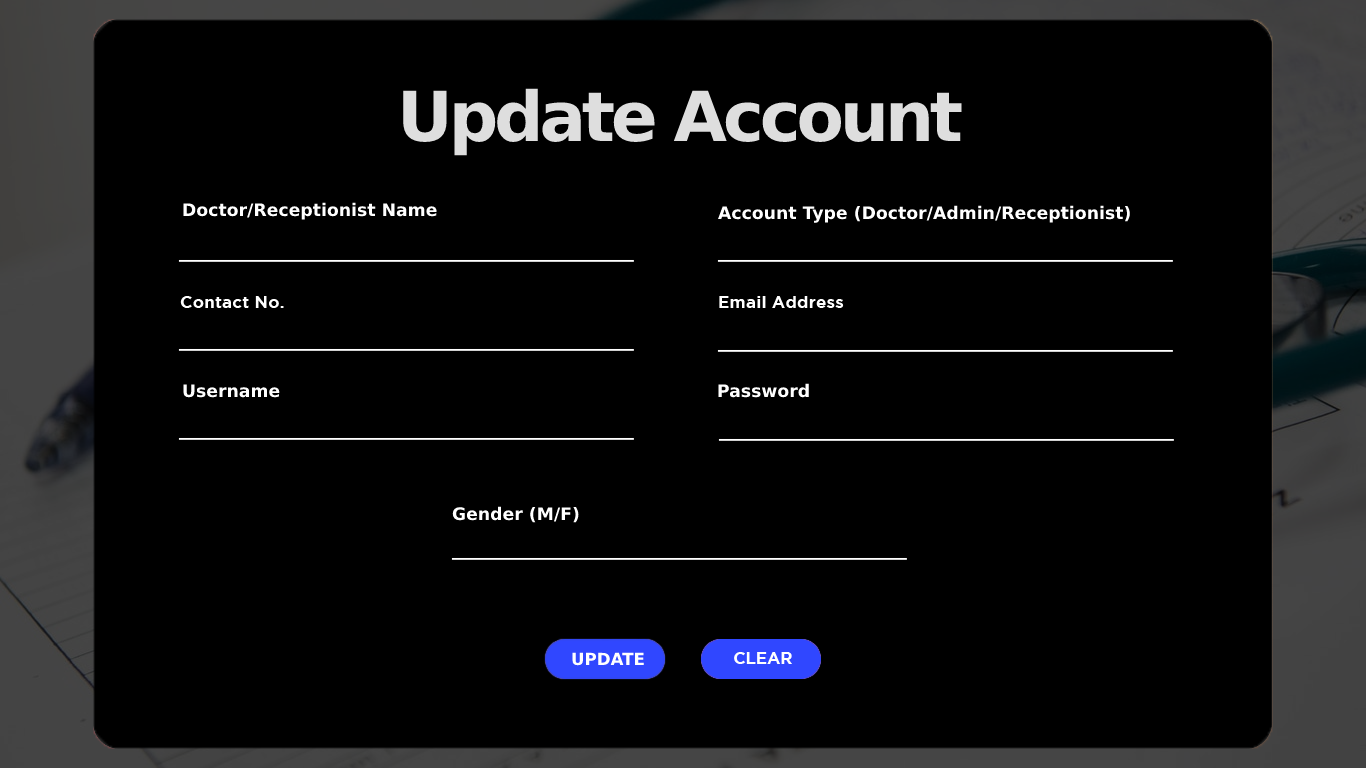
<style>
.page{position:relative;width:1366px;height:768px;background:#000000}
.page>*{position:absolute;margin:0}
.t1{font:68.9px "Gotham-Bold";letter-spacing:-0.06em;color:#dedede}
.t2{font:17.3px "Gotham-Bold";color:#ffffff}
.t3{font:16.7px "Gotham-Bold";color:#ffffff}
</style>
<div class="page">
<p class="t1" style="left:403px;top:88px;width:559px;height:68px">Update Account</p>
<p class="t2" style="left:183px;top:202px;width:254px;height:18px">Doctor/Receptionist Name</p>
<p class="t2" style="left:718px;top:205px;width:412px;height:18px">Account Type (Doctor/Admin/Receptionist)</p>
<p class="t2" style="left:180px;top:296px;width:104px;height:12px">Contact No.</p>
<p class="t2" style="left:719px;top:296px;width:125px;height:12px">Email Address</p>
<p class="t2" style="left:183px;top:384px;width:97px;height:14px">Username</p>
<p class="t2" style="left:718px;top:383px;width:91px;height:15px">Password</p>
<p class="t2" style="left:452px;top:506px;width:127px;height:17px">Gender (M/F)</p>
<p class="t3" style="left:572px;top:652px;width:72px;height:14px">UPDATE</p>
<p class="t3" style="left:734px;top:652px;width:58px;height:12px">CLEAR</p>
</div>
